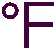
<style>
.page{position:relative;width:56px;height:48px;background:#ffffff}
.page>*{position:absolute;margin:0}
.t1{font:66.7px "Tuffy";color:#40033a}
</style>
<div class="page">
<p class="t1" style="left:2px;top:2px;width:52px;height:47px">°F</p>
</div>
